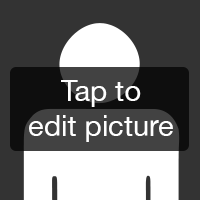
<style>
.page{position:relative;width:200px;height:200px;background:#333333}
.page>*{position:absolute;margin:0}
.t1{font:29px "HelveticaNeue";color:#ffffff}
</style>
<div class="page">
<p class="t1" style="left:29px;top:80px;width:144px;height:62px;text-align:center">Tap to<br>edit picture</p>
</div>
